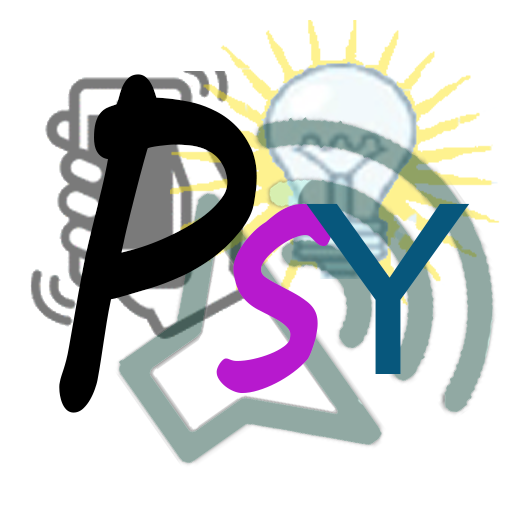
<style>
.page{position:relative;width:512px;height:512px;background:#ffffff}
.page>*{position:absolute;margin:0}
.t1{font:396px "MVBoli";letter-spacing:-0.1em;color:#000000;font-weight:bold;scale:0.72 1}
.t2{font:396px "MVBoli";letter-spacing:-0.1em;color:#b719ce;scale:0.8 1}
.t3{font:400px "BankGothicBT-Light";letter-spacing:-0.1em;color:#07577c;scale:0.78 1}
</style>
<div class="page">
<p class="t1" style="left:59px;top:74px;width:411px;height:339px">P<span class="t2">s</span><span class="t3">y</span></p>
</div>
